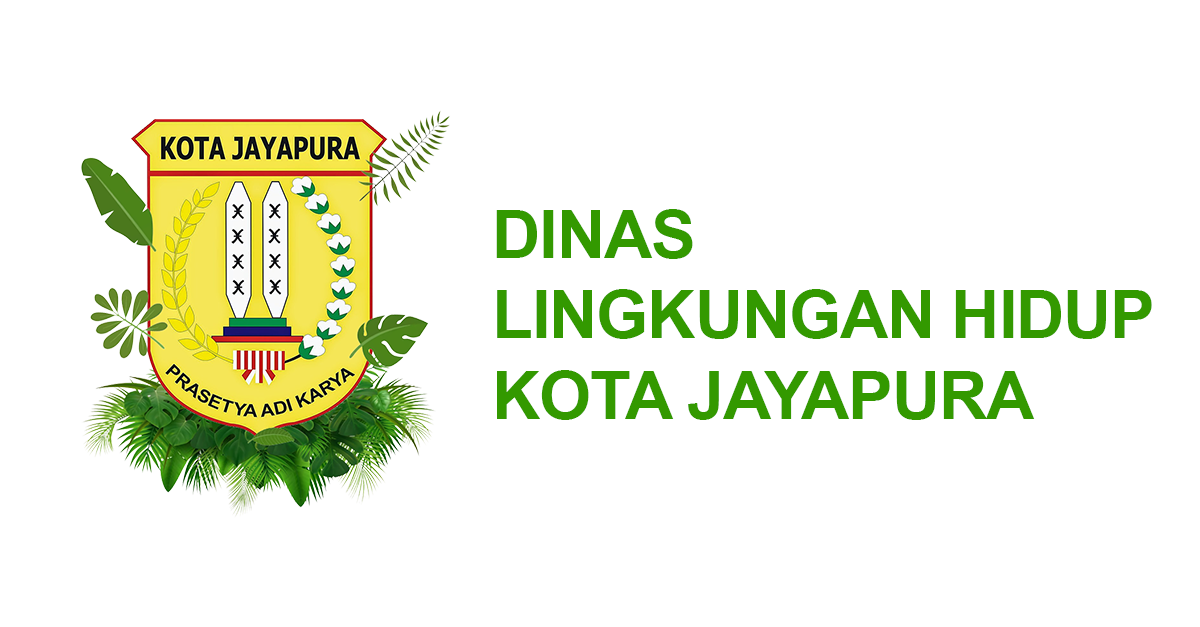
<style>
.page{position:relative;width:1200px;height:627px;background:#ffffff}
.page>*{position:absolute;margin:0}
.t1{font:67.2px "Arial-BoldMT";letter-spacing:-0.02em;color:#339900;text-transform:uppercase}
</style>
<div class="page">
<p class="t1" style="left:496px;top:209px;width:656px;height:211px">Dinas <br>Lingkungan Hidup <br>Kota Jayapura</p>
</div>
